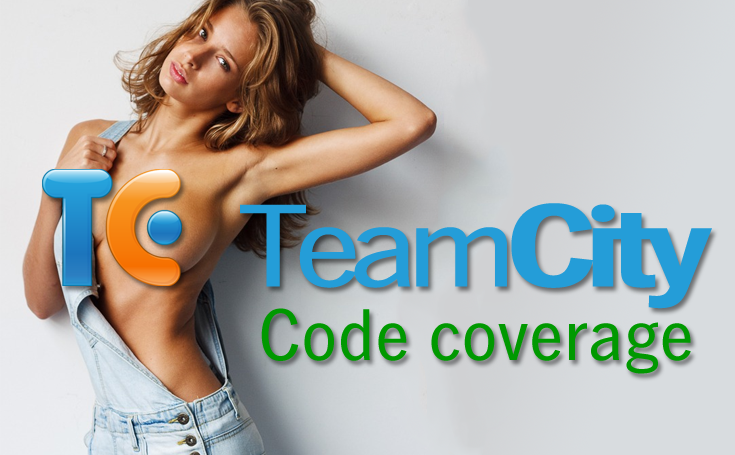
<style>
.page{position:relative;width:735px;height:455px}
.page>*{position:absolute;margin:0}
.t1{font:115.7px "LinotypeGothicW01-Regular";letter-spacing:-0.1em;color:#249dd8;scale:1.24 1}
.t2{font:115.7px "LinotypeGothicW01-Bold";letter-spacing:-0.1em;color:#249dd8;scale:1.24 1}
.t3{font:72px "LinotypeGothicW01-Regular";color:#009900}
</style>
<div class="page">
<p class="t1" style="left:240px;top:203px;width:472px;height:106px">Team<span class="t2">City</span></p>
<p class="t3" style="left:261px;top:308px;width:430px;height:66px">Code coverage</p>
</div>
